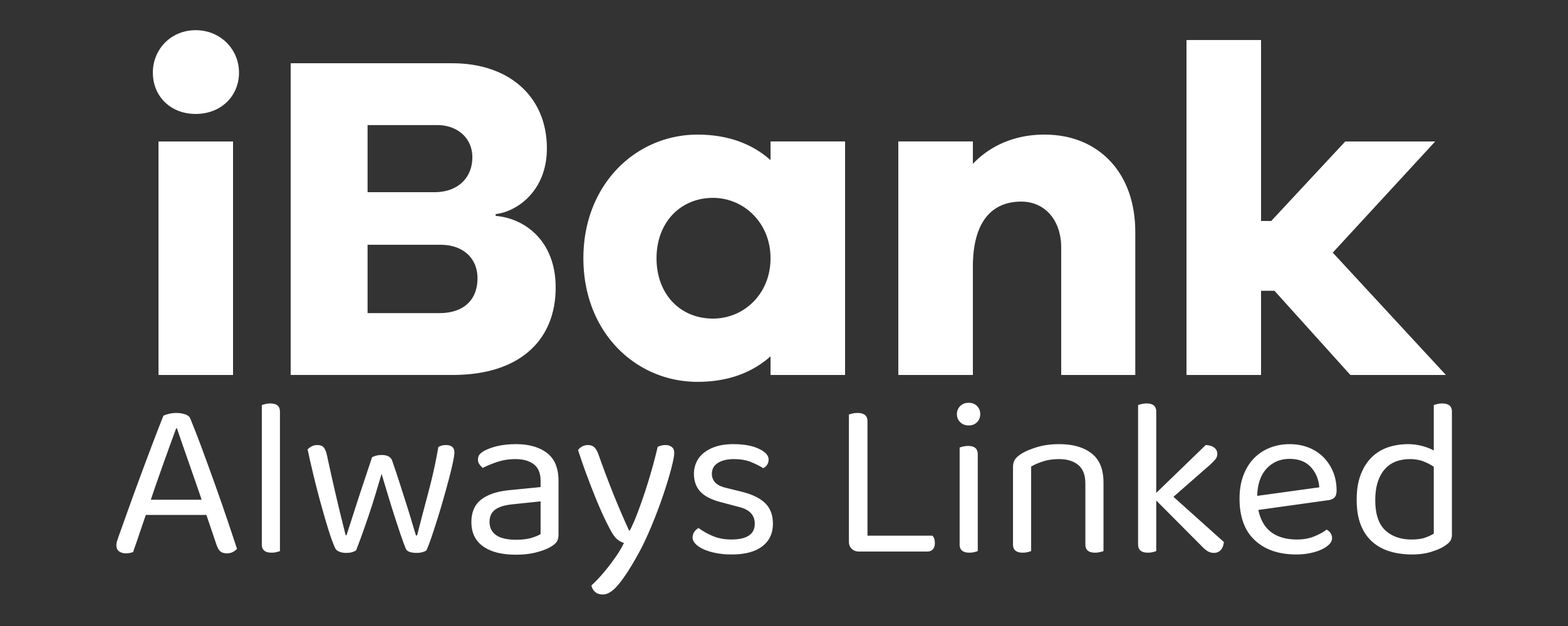
<style>
.page{position:relative;width:1568px;height:626px;background:#333333}
.page>*{position:absolute;margin:0}
.t1{font:465.6px "GalanoGrotesque-Bold";color:#ffffff}
.t2{font:226.1px "Baloo2-Regular";color:#ffffff}
</style>
<div class="page">
<p class="t1" style="left:153px;top:30px;width:1293px;height:352px">iBank</p>
<p class="t2" style="left:116px;top:403px;width:1336px;height:192px">Always Linked</p>
</div>
